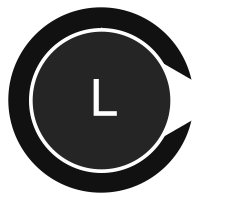
<style>
.page{position:relative;width:227px;height:200px;background:#ffffff}
.page>*{position:absolute;margin:0}
.t1{font:51.1px "ArialMT";color:#ffffff}
</style>
<div class="page">
<p class="t1" style="left:93px;top:79px;width:24px;height:37px">L</p>
</div>
